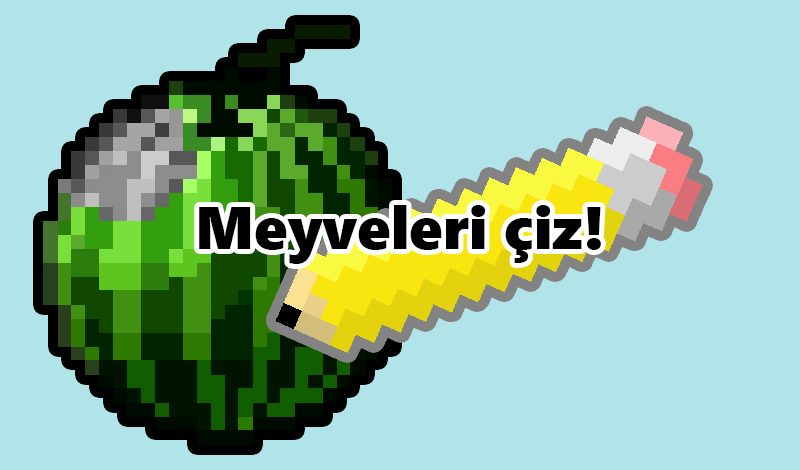
<style>
.page{position:relative;width:800px;height:470px;background:#b1e4e8}
.page>*{position:absolute;margin:0}
.t1{font:60px "SegoeUIBlack";color:#000000}
</style>
<div class="page">
<p class="t1" style="left:199px;top:205px;width:402px;height:59px">Meyveleri çiz!</p>
</div>
